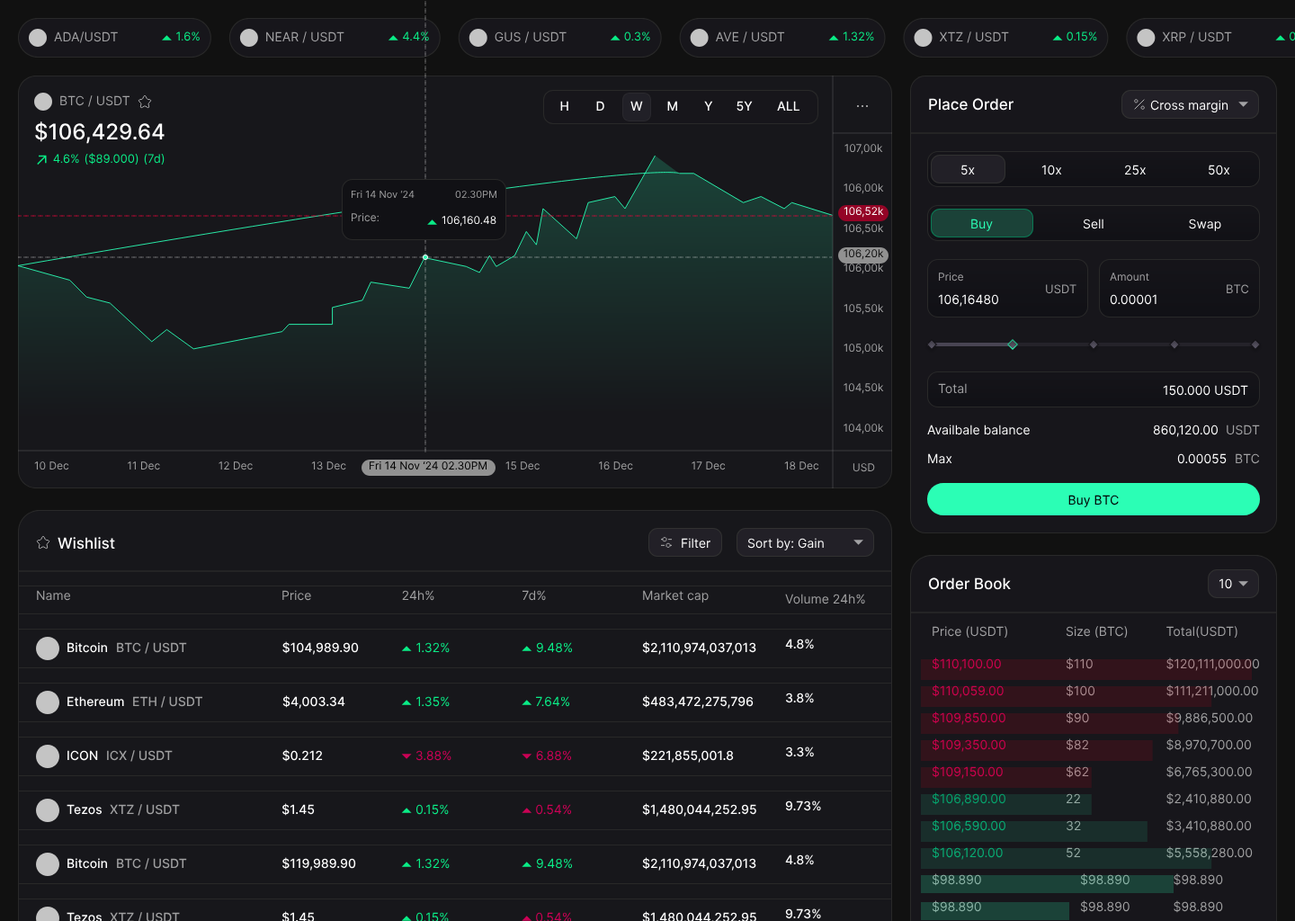
<style>
.page{position:relative;width:1295px;height:921px;background:#17171b}
.page>*{position:absolute;margin:0}
.t1{font:12.6px "Inter-Regular";color:#a2a2a4}
.t2{font:11.7px "Inter-Regular";color:#0aed87}
.t3{font:12.6px "Inter-Medium";color:#ffffff}
.t4{font:15.3px "Inter-Medium";color:#ffffff}
.t5{font:12.6px "Inter-Regular";color:#ffffff}
.t6{font:21.6px "Inter-Medium";color:#ffffff}
.t7{font:10.8px "Inter-Regular";color:#9c9c9d}
.t8{font:10.8px "Inter-Regular";color:#9d9d9e}
.t9{font:9.9px "Inter-Regular";color:#9c9c9d}
.t10{font:9.9px "Inter-Regular";color:#a0a0a1}
.t11{font:10.8px "Inter-Regular";color:#ffffff}
.t12{font:10.8px "Inter-Regular";color:#a0a0a1}
.t13{font:12.6px "Inter-Regular";color:#2bffb6}
.t14{font:10.8px "Inter-Regular";color:#9b9b9c}
.t15{font:10.8px "Inter-Regular";color:#121212}
.t16{font:10.8px "Inter-Regular";color:#a1a1a3}
.t17{font:10.8px "Inter-Regular";color:#9d9d9f}
.t18{font:11.7px "Inter-Regular";color:#a1a1a3}
.t19{font:10.8px "Inter-Regular";color:#9a9a9b}
.t20{font:12.6px "Inter-Regular";color:#a1a0a2}
.t21{font:10.8px "Inter-Regular";color:#9e9e9f}
.t22{font:10.8px "Inter-Regular";color:#010101}
.t23{font:10.8px "Inter-Regular";color:#9f9fa0}
.t24{font:12.6px "Inter-Regular";color:#000000}
.t25{font:12.6px "Inter-Regular";color:#a0a0a1}
.t26{font:12.6px "Inter-Medium";color:#a0a0a1}
.t27{font:12.6px "Inter-Regular";color:#0aed87}
.t28{font:12.6px "Inter-Regular";color:#cb0155}
.t29{font:12.6px "Inter-Regular";color:#a88a8e}
.t30{font:12.6px "Inter-Regular";color:#009964}
.t31{font:12.6px "Inter-Regular";color:#04a36c}
.t32{font:12.6px "Inter-Regular";color:#8ab2a5}
</style>
<div class="page">
<p class="t1" style="left:54px;top:31px;width:64px;height:12px">ADA/USDT</p>
<p class="t2" style="left:176px;top:31px;width:24px;height:10px">1.6%</p>
<p class="t1" style="left:266px;top:31px;width:78px;height:12px">NEAR / USDT</p>
<p class="t2" style="left:403px;top:31px;width:26px;height:10px">4.4%</p>
<p class="t1" style="left:495px;top:31px;width:72px;height:12px">GUS / USDT</p>
<p class="t2" style="left:624px;top:31px;width:26px;height:10px">0.3%</p>
<p class="t1" style="left:715px;top:31px;width:70px;height:12px">AVE / USDT</p>
<p class="t2" style="left:843px;top:31px;width:31px;height:10px">1.32%</p>
<p class="t1" style="left:939px;top:31px;width:70px;height:12px">XTZ / USDT</p>
<p class="t2" style="left:1067px;top:31px;width:30px;height:10px">0.15%</p>
<p class="t1" style="left:1162px;top:31px;width:70px;height:12px">XRP / USDT</p>
<p class="t1" style="left:60px;top:95px;width:69px;height:12px">BTC / USDT</p>
<p class="t3" style="left:560px;top:101px;width:8px;height:10px">H</p>
<p class="t3" style="left:596px;top:101px;width:8px;height:10px">D</p>
<p class="t3" style="left:630px;top:101px;width:13px;height:10px">W</p>
<p class="t3" style="left:667px;top:101px;width:10px;height:10px">M</p>
<p class="t3" style="left:704px;top:101px;width:9px;height:10px">Y</p>
<p class="t3" style="left:736px;top:101px;width:17px;height:11px">5Y</p>
<p class="t3" style="left:777px;top:101px;width:22px;height:10px">ALL</p>
<p class="t4" style="left:929px;top:98px;width:84px;height:13px">Place Order</p>
<p class="t5" style="left:1150px;top:100px;width:78px;height:13px">Cross margin</p>
<p class="t6" style="left:35px;top:121px;width:130px;height:23px">$106,429.64</p>
<p class="t7" style="left:844px;top:144px;width:39px;height:11px">107,00k</p>
<p class="t2" style="left:53px;top:154px;width:26px;height:10px">4.6%</p>
<p class="t2" style="left:85px;top:153px;width:53px;height:12px">($89.000)</p>
<p class="t2" style="left:144px;top:154px;width:21px;height:11px">(7d)</p>
<p class="t5" style="left:961px;top:165px;width:14px;height:10px">5x</p>
<p class="t5" style="left:1041px;top:165px;width:21px;height:10px">10x</p>
<p class="t5" style="left:1125px;top:165px;width:21px;height:10px">25x</p>
<p class="t5" style="left:1209px;top:165px;width:21px;height:10px">50x</p>
<p class="t8" style="left:844px;top:183px;width:40px;height:11px">106,00k</p>
<p class="t9" style="left:351px;top:190px;width:64px;height:9px">Fri 14 Nov ‘24</p>
<p class="t10" style="left:455px;top:190px;width:41px;height:9px">02.30PM</p>
<p class="t11" style="left:844px;top:207px;width:40px;height:11px">106,52k</p>
<p class="t12" style="left:352px;top:213px;width:27px;height:9px">Price:</p>
<p class="t11" style="left:442px;top:216px;width:54px;height:11px">106,160.48</p>
<p class="t13" style="left:971px;top:219px;width:22px;height:12px">Buy</p>
<p class="t5" style="left:1083px;top:219px;width:20px;height:10px">Sell</p>
<p class="t5" style="left:1189px;top:219px;width:32px;height:12px">Swap</p>
<p class="t14" style="left:844px;top:224px;width:40px;height:11px">106,50k</p>
<p class="t15" style="left:844px;top:249px;width:40px;height:11px">106,20k</p>
<p class="t8" style="left:844px;top:263px;width:40px;height:11px">106,00k</p>
<p class="t16" style="left:939px;top:272px;width:25px;height:9px">Price</p>
<p class="t17" style="left:1110px;top:272px;width:39px;height:9px">Amount</p>
<p class="t18" style="left:1046px;top:284px;width:30px;height:10px">USDT</p>
<p class="t18" style="left:1227px;top:284px;width:22px;height:10px">BTC</p>
<p class="t19" style="left:844px;top:304px;width:40px;height:11px">105,50k</p>
<p class="t5" style="left:938px;top:294px;width:60px;height:13px">106,16480</p>
<p class="t5" style="left:1110px;top:294px;width:46px;height:11px">0.00001</p>
<p class="t14" style="left:844px;top:344px;width:40px;height:10px">105,00k</p>
<p class="t8" style="left:844px;top:383px;width:40px;height:11px">104,50k</p>
<p class="t20" style="left:938px;top:383px;width:29px;height:11px">Total</p>
<p class="t5" style="left:1163px;top:385px;width:85px;height:11px">150.000 USDT</p>
<p class="t7" style="left:844px;top:424px;width:40px;height:10px">104,00k</p>
<p class="t5" style="left:927px;top:424px;width:103px;height:11px">Availbale balance</p>
<p class="t5" style="left:1153px;top:424px;width:65px;height:13px">860,120.00</p>
<p class="t1" style="left:1227px;top:424px;width:33px;height:11px">USDT</p>
<p class="t8" style="left:34px;top:461px;width:35px;height:9px">10 Dec</p>
<p class="t12" style="left:128px;top:461px;width:32px;height:9px">11 Dec</p>
<p class="t21" style="left:219px;top:461px;width:34px;height:9px">12 Dec</p>
<p class="t21" style="left:311px;top:461px;width:35px;height:9px">13 Dec</p>
<p class="t22" style="left:370px;top:461px;width:117px;height:9px">Fri 14 Nov ‘24 02.30PM</p>
<p class="t23" style="left:505px;top:461px;width:35px;height:9px">15 Dec</p>
<p class="t23" style="left:598px;top:461px;width:35px;height:9px">16 Dec</p>
<p class="t12" style="left:692px;top:461px;width:34px;height:9px">17 Dec</p>
<p class="t8" style="left:784px;top:461px;width:35px;height:9px">18 Dec</p>
<p class="t5" style="left:928px;top:453px;width:24px;height:11px">Max</p>
<p class="t5" style="left:1177px;top:453px;width:50px;height:11px">0.00055</p>
<p class="t1" style="left:1236px;top:453px;width:24px;height:11px">BTC</p>
<p class="t21" style="left:852px;top:463px;width:23px;height:9px">USD</p>
<p class="t24" style="left:1068px;top:495px;width:51px;height:12px">Buy BTC</p>
<p class="t4" style="left:58px;top:537px;width:57px;height:12px">Wishlist</p>
<p class="t5" style="left:682px;top:538px;width:28px;height:11px">Filter</p>
<p class="t5" style="left:747px;top:538px;width:77px;height:12px">Sort by: Gain</p>
<p class="t4" style="left:928px;top:577px;width:83px;height:13px">Order Book</p>
<p class="t5" style="left:1218px;top:578px;width:14px;height:11px">10</p>
<p class="t25" style="left:37px;top:590px;width:34px;height:11px">Name</p>
<p class="t25" style="left:282px;top:590px;width:29px;height:11px">Price</p>
<p class="t25" style="left:402px;top:590px;width:32px;height:11px">24h%</p>
<p class="t25" style="left:522px;top:590px;width:24px;height:11px">7d%</p>
<p class="t25" style="left:643px;top:590px;width:66px;height:13px">Market cap</p>
<p class="t25" style="left:785px;top:594px;width:80px;height:10px">Volume 24h%</p>
<p class="t1" style="left:933px;top:626px;width:74px;height:12px">Price (USDT)</p>
<p class="t1" style="left:1066px;top:626px;width:62px;height:12px">Size (BTC)</p>
<p class="t1" style="left:1166px;top:626px;width:71px;height:12px">Total(USDT)</p>
<p class="t3" style="left:282px;top:641px;width:77px;height:14px">$104,989.90</p>
<p class="t3" style="left:642px;top:641px;width:114px;height:14px">$2,110,974,037,013</p>
<p class="t3" style="left:785px;top:638px;width:29px;height:11px">4.8%</p>
<p class="t3" style="left:67px;top:642px;width:41px;height:11px">Bitcoin</p>
<p class="t26" style="left:117px;top:642px;width:70px;height:12px">BTC / USDT</p>
<p class="t27" style="left:416px;top:642px;width:34px;height:11px">1.32%</p>
<p class="t27" style="left:536px;top:642px;width:37px;height:11px">9.48%</p>
<p class="t28" style="left:932px;top:657px;width:69px;height:14px">$110,100.00</p>
<p class="t25" style="left:1066px;top:657px;width:27px;height:13px">$110</p>
<p class="t29" style="left:1166px;top:657px;width:94px;height:14px">$120,111,000.00</p>
<p class="t28" style="left:932px;top:684px;width:72px;height:14px">$110,059.00</p>
<p class="t29" style="left:1066px;top:684px;width:29px;height:13px">$100</p>
<p class="t25" style="left:1166px;top:684px;width:92px;height:14px">$111,211,000.00</p>
<p class="t3" style="left:67px;top:696px;width:57px;height:11px">Ethereum</p>
<p class="t26" style="left:133px;top:696px;width:70px;height:12px">ETH / USDT</p>
<p class="t3" style="left:282px;top:695px;width:63px;height:14px">$4,003.34</p>
<p class="t27" style="left:416px;top:696px;width:34px;height:11px">1.35%</p>
<p class="t27" style="left:536px;top:696px;width:34px;height:11px">7.64%</p>
<p class="t3" style="left:642px;top:695px;width:112px;height:14px">$483,472,275,796</p>
<p class="t3" style="left:785px;top:692px;width:29px;height:11px">3.8%</p>
<p class="t28" style="left:932px;top:711px;width:73px;height:14px">$109,850.00</p>
<p class="t29" style="left:1066px;top:711px;width:23px;height:13px">$90</p>
<p class="t25" style="left:1166px;top:711px;width:87px;height:14px">$9,886,500.00</p>
<p class="t3" style="left:67px;top:750px;width:31px;height:11px">ICON</p>
<p class="t26" style="left:107px;top:750px;width:66px;height:12px">ICX / USDT</p>
<p class="t3" style="left:282px;top:749px;width:41px;height:13px">$0.212</p>
<p class="t28" style="left:415px;top:750px;width:36px;height:11px">3.88%</p>
<p class="t28" style="left:536px;top:750px;width:36px;height:11px">6.88%</p>
<p class="t3" style="left:642px;top:749px;width:92px;height:14px">$221,855,001.8</p>
<p class="t3" style="left:785px;top:746px;width:29px;height:11px">3.3%</p>
<p class="t28" style="left:932px;top:738px;width:74px;height:14px">$109,350.00</p>
<p class="t29" style="left:1066px;top:738px;width:23px;height:13px">$82</p>
<p class="t25" style="left:1166px;top:738px;width:85px;height:14px">$8,970,700.00</p>
<p class="t28" style="left:932px;top:765px;width:71px;height:14px">$109,150.00</p>
<p class="t29" style="left:1066px;top:765px;width:23px;height:13px">$62</p>
<p class="t25" style="left:1166px;top:765px;width:86px;height:14px">$6,765,300.00</p>
<p class="t30" style="left:932px;top:792px;width:73px;height:14px">$106,890.00</p>
<p class="t25" style="left:1067px;top:793px;width:13px;height:10px">22</p>
<p class="t25" style="left:1166px;top:792px;width:85px;height:14px">$2,410,880.00</p>
<p class="t3" style="left:67px;top:804px;width:36px;height:11px">Tezos</p>
<p class="t26" style="left:110px;top:804px;width:70px;height:12px">XTZ / USDT</p>
<p class="t3" style="left:281px;top:803px;width:34px;height:13px">$1.45</p>
<p class="t27" style="left:415px;top:804px;width:34px;height:11px">0.15%</p>
<p class="t28" style="left:536px;top:804px;width:36px;height:11px">0.54%</p>
<p class="t3" style="left:642px;top:803px;width:114px;height:14px">$1,480,044,252.95</p>
<p class="t3" style="left:785px;top:800px;width:36px;height:11px">9.73%</p>
<p class="t31" style="left:932px;top:819px;width:73px;height:14px">$106,590.00</p>
<p class="t25" style="left:1067px;top:820px;width:14px;height:11px">32</p>
<p class="t25" style="left:1166px;top:819px;width:86px;height:14px">$3,410,880.00</p>
<p class="t3" style="left:67px;top:858px;width:41px;height:11px">Bitcoin</p>
<p class="t26" style="left:117px;top:858px;width:70px;height:12px">BTC / USDT</p>
<p class="t3" style="left:282px;top:857px;width:74px;height:13px">$119,989.90</p>
<p class="t27" style="left:416px;top:858px;width:34px;height:11px">1.32%</p>
<p class="t27" style="left:536px;top:858px;width:37px;height:11px">9.48%</p>
<p class="t3" style="left:642px;top:857px;width:114px;height:13px">$2,110,974,037,013</p>
<p class="t3" style="left:785px;top:854px;width:29px;height:11px">4.8%</p>
<p class="t31" style="left:932px;top:846px;width:71px;height:14px">$106,120.00</p>
<p class="t25" style="left:1067px;top:847px;width:13px;height:11px">52</p>
<p class="t25" style="left:1166px;top:846px;width:87px;height:14px">$5,558,280.00</p>
<p class="t32" style="left:932px;top:873px;width:49px;height:13px">$98.890</p>
<p class="t32" style="left:1080px;top:873px;width:49px;height:13px">$98.890</p>
<p class="t25" style="left:1174px;top:873px;width:49px;height:13px">$98.890</p>
<p class="t32" style="left:932px;top:900px;width:49px;height:13px">$98.890</p>
<p class="t25" style="left:1080px;top:900px;width:49px;height:13px">$98.890</p>
<p class="t25" style="left:1174px;top:900px;width:49px;height:13px">$98.890</p>
<p class="t3" style="left:67px;top:912px;width:36px;height:11px">Tezos</p>
<p class="t27" style="left:415px;top:912px;width:34px;height:11px">0.15%</p>
<p class="t28" style="left:536px;top:912px;width:36px;height:11px">0.54%</p>
<p class="t3" style="left:785px;top:908px;width:36px;height:11px">9.73%</p>
</div>
